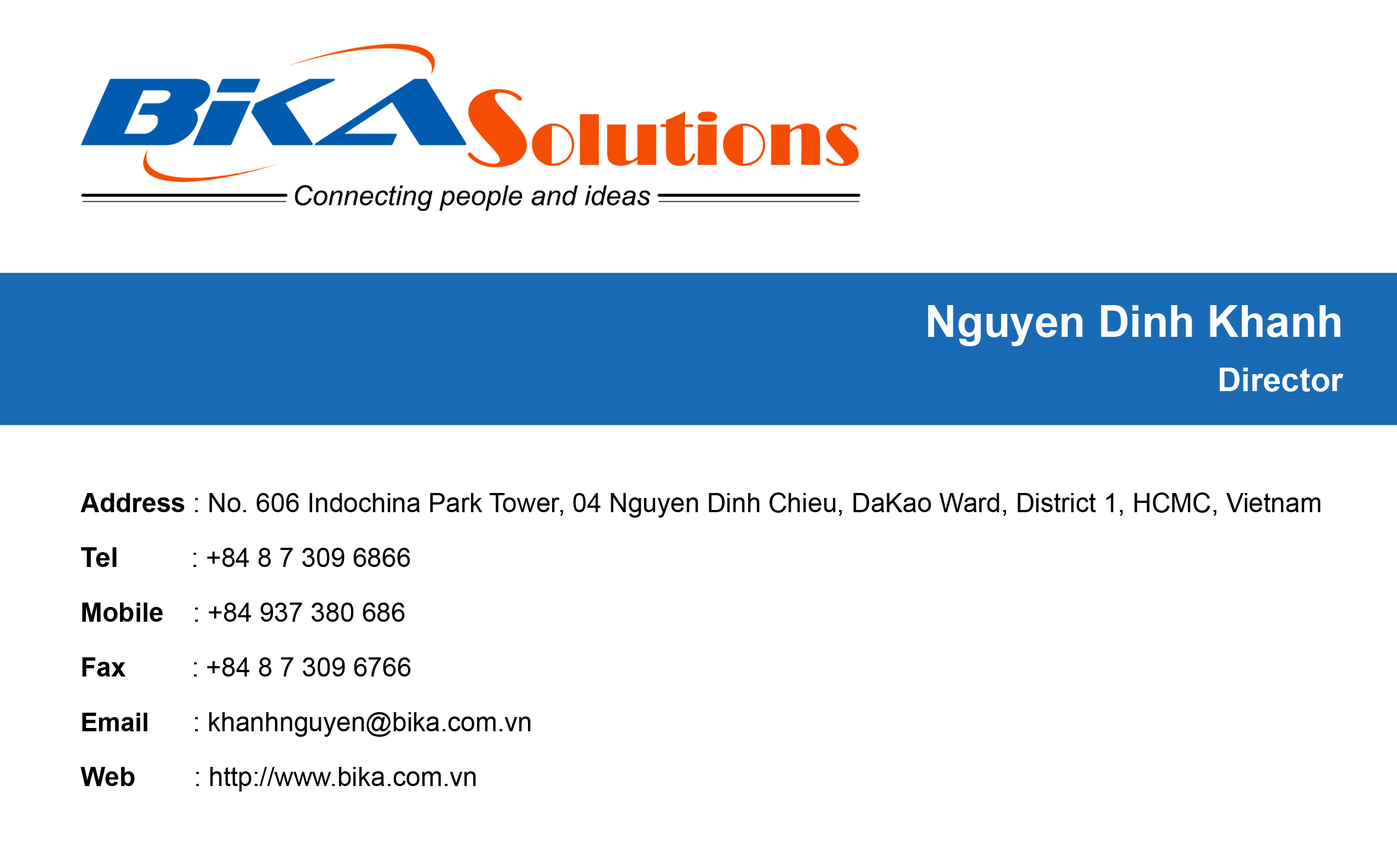
<style>
.page{position:relative;width:1397px;height:854px;background:#ffffff}
.page>*{position:absolute;margin:0}
.t1{font:43.8px "Arial-BoldMT";color:#fdfbfb}
.t2{font:32.9px "Arial-BoldMT";color:#fdfcfc}
.t3{font:26.3px "ArialMT";color:#000000}
.t4{font:26.3px "Arial-BoldMT";color:#000000}
.t5{font:27.4px "Arial-BoldMT";color:#000000}
.t6{font:25.7px "Arial-BoldMT";color:#000000}
</style>
<div class="page">
<p class="t1" style="left:928px;top:305px;width:412px;height:41px">Nguyen Dinh Khanh</p>
<p class="t2" style="left:1219px;top:367px;width:124px;height:25px">Director</p>
<p class="t3" style="left:80px;top:492px;width:1240px;height:25px"><span class="t4">Address</span> : No. 606 Indochina Park Tower, 04 Nguyen Dinh Chieu, DaKao Ward, District 1, HCMC, Vietnam</p>
<p class="t3" style="left:81px;top:547px;width:329px;height:20px"><span class="t5">Tel </span>         : +84 8 7 309 6866</p>
<p class="t3" style="left:82px;top:602px;width:323px;height:19px"><span class="t4">Mobile   </span> : +84 937 380 686</p>
<p class="t3" style="left:82px;top:657px;width:329px;height:19px"><span class="t4">Fax       </span>  : +84 8 7 309 6766</p>
<p class="t3" style="left:82px;top:712px;width:449px;height:24px"><span class="t6">Email      </span>: khanhnguyen@bika.com.vn</p>
<p class="t3" style="left:80px;top:767px;width:396px;height:24px"><span class="t4">Web      </span>  : http://www.bika.com.vn</p>
</div>
